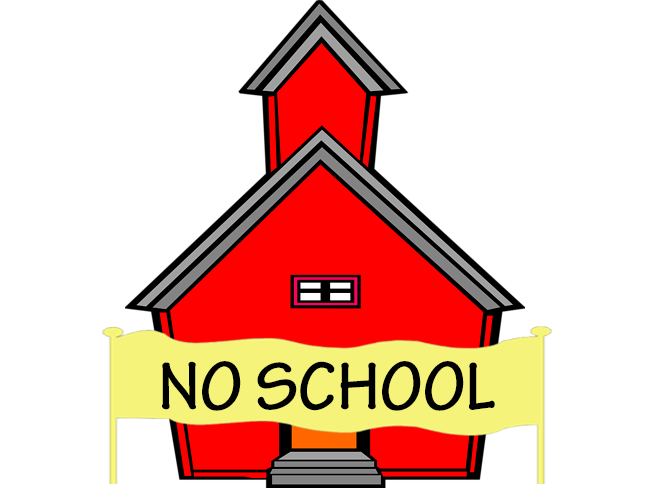
<style>
.page{position:relative;width:650px;height:488px;background:#ffffff}
.page>*{position:absolute;margin:0}
.t1{font:72px "TektonPro-Bold";color:#010101;scale:0.96 1}
</style>
<div class="page">
<p class="t1" style="left:162px;top:361px;width:333px;height:50px">NO SCHOOL</p>
</div>
